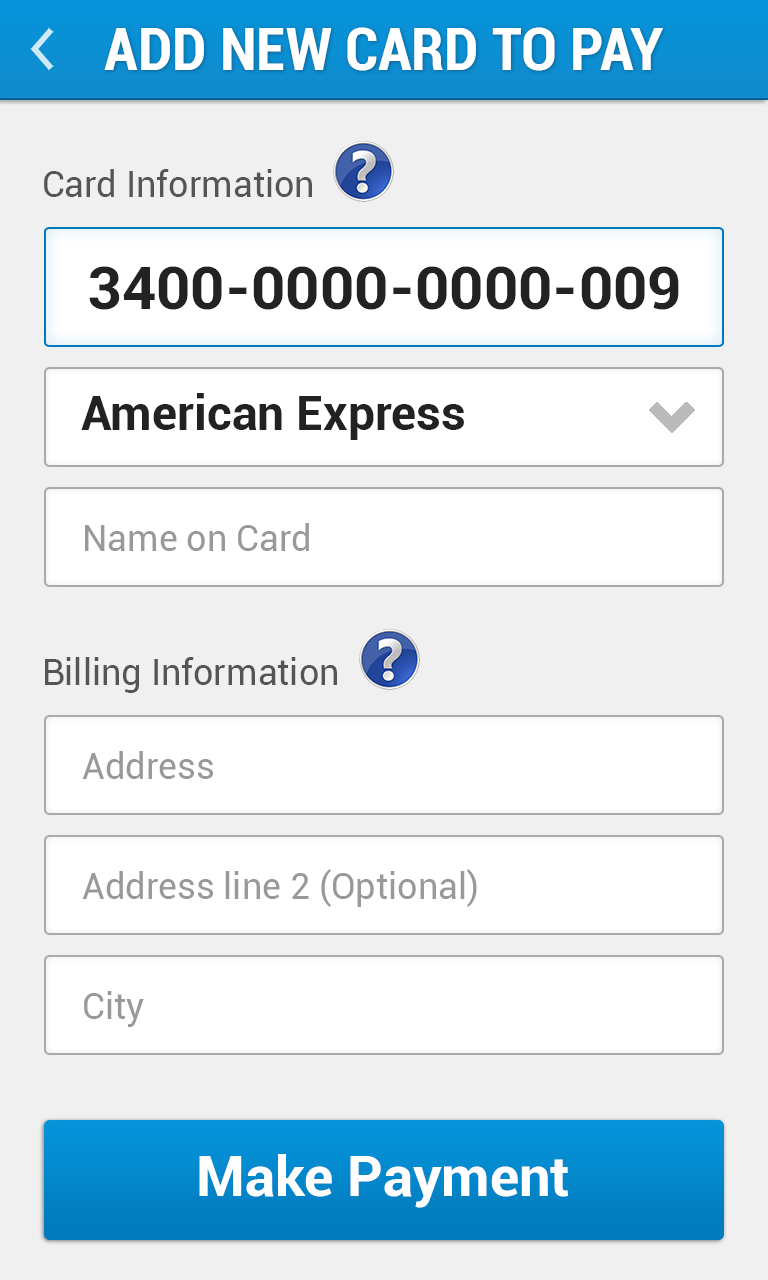
<style>
.page{position:relative;width:768px;height:1280px;background:#f0f0f0}
.page>*{position:absolute;margin:0}
.t1{font:60px "Roboto-BoldCondensed";color:#ffffff}
.t2{font:36px "Roboto-Regular";color:#555555}
.t3{font:60px "Roboto-Bold";color:#222222}
.t4{font:48px "Roboto-Bold";color:#222222}
.t5{font:36px "Roboto-Regular";color:#999999}
.t6{font:56px "Roboto-Bold";color:#ffffff}
</style>
<div class="page">
<p class="t1" style="left:104px;top:27px;width:559px;height:44px">ADD NEW CARD TO PAY</p>
<p class="t2" style="left:44px;top:169px;width:268px;height:28px">Card Information</p>
<p class="t3" style="left:89px;top:266px;width:590px;height:44px">3400-0000-0000-009</p>
<p class="t4" style="left:81px;top:393px;width:383px;height:47px">American Express</p>
<p class="t5" style="left:85px;top:523px;width:224px;height:28px">Name on Card</p>
<p class="t2" style="left:45px;top:657px;width:292px;height:36px">Billing Information</p>
<p class="t5" style="left:82px;top:751px;width:131px;height:28px">Address</p>
<p class="t5" style="left:82px;top:869px;width:395px;height:38px">Address line 2 (Optional)</p>
<p class="t5" style="left:84px;top:991px;width:60px;height:36px">City</p>
<p class="t6" style="left:199px;top:1154px;width:369px;height:54px">Make Payment</p>
</div>
